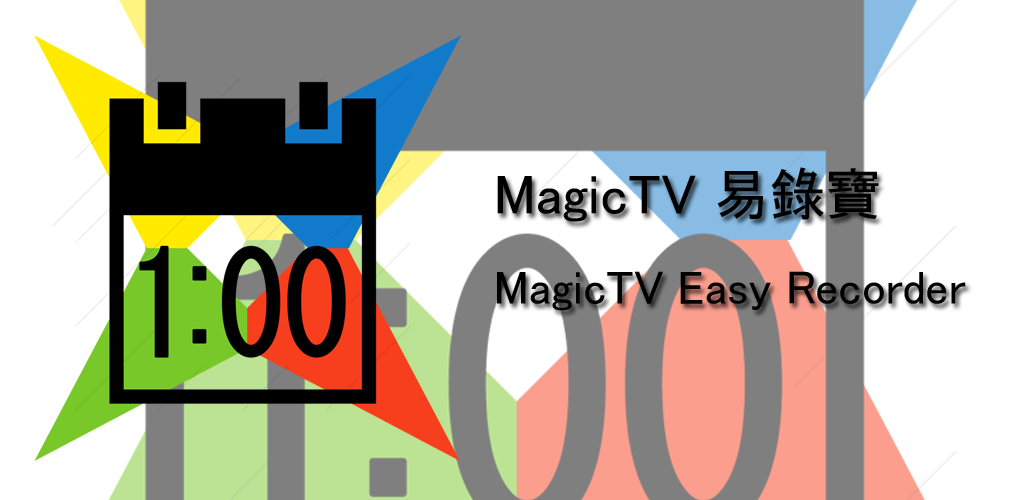
<style>
.page{position:relative;width:1024px;height:500px;background:#ffffff}
.page>*{position:absolute;margin:0}
.t1{font:47px "MS-UIGothic";color:#000000}
.t2{font:56px "MS-UIGothic";color:#000000}
</style>
<div class="page">
<p class="t1" style="left:497px;top:167px;width:469px;height:144px"><span class="t2">MagicTV 易錄寶<br></span>MagicTV Easy Recorder</p>
</div>
